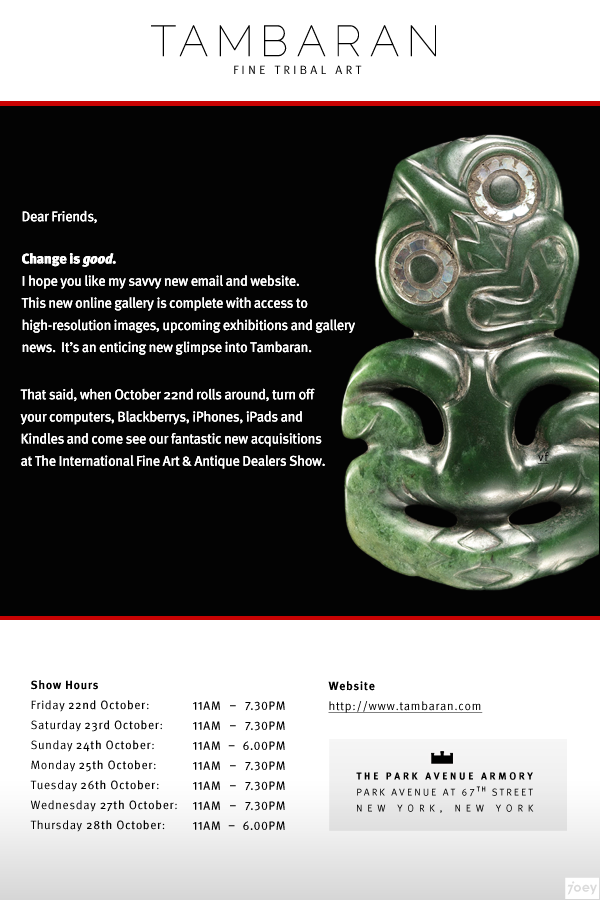
<style>
.page{position:relative;width:600px;height:900px;background:#030303}
.page>*{position:absolute;margin:0}
.t1{font:43.2px "Raleway-Thin";letter-spacing:0.19em;color:#000000}
.t2{font:12px "MetaPro-Normal";letter-spacing:0.27em;color:#000000;text-transform:uppercase}
.t3{font:14.1px/22.1px "MetaPro-Medium";letter-spacing:-0.03em;color:#ffffff}
.t4{font:14.1px/22.1px "MetaPro-Black";letter-spacing:-0.03em;color:#ffffff}
.t5{font:14.1px/22.1px "MetaPro-BlackItalic";letter-spacing:-0.03em;color:#ffffff}
.t6{font:12px "MetaPro-Normal";letter-spacing:0.05em;color:#000000;text-decoration:underline}
.t7{font:12px/20px "MetaPro-Normal";letter-spacing:0.05em;color:#000000}
.t8{font:12px/20px "MetaPro-Bold";letter-spacing:0.05em;color:#000000}
.t9{font:12px/20px "MetaPro-Book";letter-spacing:0.05em;color:#000000}
.t10{font:12px/20px "MetaPro-Normal";letter-spacing:0.05em;color:#000000;text-decoration:underline}
.t11{font:12px/20px "MetaPro-Book";letter-spacing:0.05em;color:#000000;text-transform:uppercase}
.t12{font:10px/16px "MetaPro-Bold";letter-spacing:0.27em;color:#000000;text-transform:uppercase}
.t13{font:10px/16px "MetaPro-Normal";letter-spacing:0.205em;color:#000000;text-transform:uppercase}
.t14{font:7px/16px "MetaPro-Medium";letter-spacing:0.205em;color:#000000;text-transform:uppercase}
.t15{font:10px/16px "MetaPro-Normal";letter-spacing:0.48em;color:#000000;text-transform:uppercase}
</style>
<div class="page">
<p class="t1" style="left:151px;top:25px;width:285px;height:32px">TAMBARAN</p>
<p class="t2" style="left:234px;top:65px;width:128px;height:9px">fine tribal art</p>
<p class="t3" style="left:21px;top:210px;width:334px;height:145px">Dear Friends,<br><span class="t4">Change is </span><span class="t5">good</span><span class="t4">.  <br></span>I hope you like my savvy new email and website.  <br>This new online gallery is complete with access to high-resolution images, upcoming exhibitions and gallery news.  It’s an enticing new glimpse into Tambaran.</p>
<p class="t3" style="left:21px;top:210px;width:334px;height:145px">Dear Friends,<br><span class="t4">Change is </span><span class="t5">good</span><span class="t4">.  <br></span>I hope you like my savvy new email and website.  <br>This new online gallery is complete with access to high-resolution images, upcoming exhibitions and gallery news.  It’s an enticing new glimpse into Tambaran.</p>
<p class="t3" style="left:20px;top:388px;width:305px;height:81px">That said, when October 22nd rolls around, turn off <br>your computers, Blackberrys, iPhones, iPads and Kindles and come see our fantastic new acquisitions <br>at The International Fine Art &amp; Antique Dealers Show.</p>
<p class="t3" style="left:20px;top:388px;width:305px;height:81px">That said, when October 22nd rolls around, turn off <br>your computers, Blackberrys, iPhones, iPads and Kindles and come see our fantastic new acquisitions <br>at The International Fine Art &amp; Antique Dealers Show.</p>
<p class="t6" style="left:538px;top:452px;width:11px;height:12px">vf</p>
<p class="t7" style="left:30px;top:680px;width:147px;height:152px"><span class="t8">Show Hours<br></span>Friday <span class="t9">22nd October</span>:<br>Saturday <span class="t9">23rd October</span>:      <br>Sunday <span class="t9">24th October</span>:       <br>Monday <span class="t9">25th October</span>:        <br>Tuesday <span class="t9">26th October</span>:       <br>Wednesday <span class="t9">27th October</span>: <br>Thursday <span class="t9">28th October</span>:</p>
<p class="t10" style="left:328px;top:681px;width:155px;height:32px"><span class="t8">Website<br></span>http://www.tambaran.com</p>
<p class="t11" style="left:193px;top:701px;width:92px;height:129px;text-align:justify">11am – 7.30pm<br>11am – 7.30pm<br>11am – 6.00pm <br>11am – 7.30pm<br>11am – 7.30pm<br>11am – 7.30pm<br>11am – 6.00pm</p>
<p class="t12" style="left:356px;top:772px;width:178px;height:41px;text-align:center">The Park Avenue Armory<br><span class="t13">Park Avenue at 67</span><span class="t14">th</span><span class="t13"> Street<br></span><span class="t15">New York, New York</span></p>
</div>
